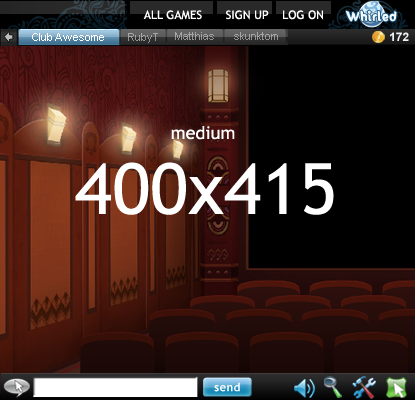
<style>
.page{position:relative;width:415px;height:400px;background:#000000}
.page>*{position:absolute;margin:0}
.t1{font:11.8px "TrebuchetMS";color:#ffffff}
.t2{font:10.8px "SunnySide";letter-spacing:0.05em;color:#eff9fe;font-weight:bold}
.t3{font:10.8px "ArialMT";color:#ffffff}
.t4{font:10.8px "ArialMT";color:#939393}
.t5{font:11.8px "Arial-BoldMT";color:#f1f1f1}
.t6{font:17.6px "TrebuchetMS";color:#ffffff}
.t7{font:70.6px "TrebuchetMS";color:#ffffff}
.t8{font:11.4px "TrebuchetMS";letter-spacing:0.04em;color:#ffffff;scale:1.05 1}
</style>
<div class="page">
<p class="t1" style="left:143px;top:10px;width:59px;height:10px">ALL GAMES</p>
<p class="t1" style="left:226px;top:10px;width:43px;height:10px">SIGN UP</p>
<p class="t1" style="left:283px;top:10px;width:40px;height:10px">LOG ON</p>
<p class="t2" style="left:346px;top:10px;width:51px;height:12px">Whirled</p>
<p class="t3" style="left:32px;top:33px;width:72px;height:8px">Club Awesome</p>
<p class="t4" style="left:128px;top:33px;width:30px;height:10px">RubyT</p>
<p class="t4" style="left:175px;top:32px;width:39px;height:8px">Matthias</p>
<p class="t4" style="left:234px;top:32px;width:44px;height:8px">skunktom</p>
<p class="t5" style="left:390px;top:32px;width:19px;height:9px">172</p>
<p class="t6" style="left:171px;top:126px;width:64px;height:14px">medium</p>
<p class="t7" style="left:75px;top:162px;width:259px;height:53px">400x415</p>
<p class="t8" style="left:214px;top:382px;width:26px;height:10px">send</p>
</div>
